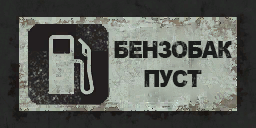
<style>
.page{position:relative;width:256px;height:128px}
.page>*{position:absolute;margin:0}
.t1{font:23px/29px "Arial-Black";letter-spacing:-0.08em;color:#080808;scale:0.93 1}
</style>
<div class="page">
<p class="t1" style="left:114px;top:41px;width:118px;height:46px;text-align:center;opacity:0.94">БЕНЗОБАК<br>ПУСТ</p>
</div>
